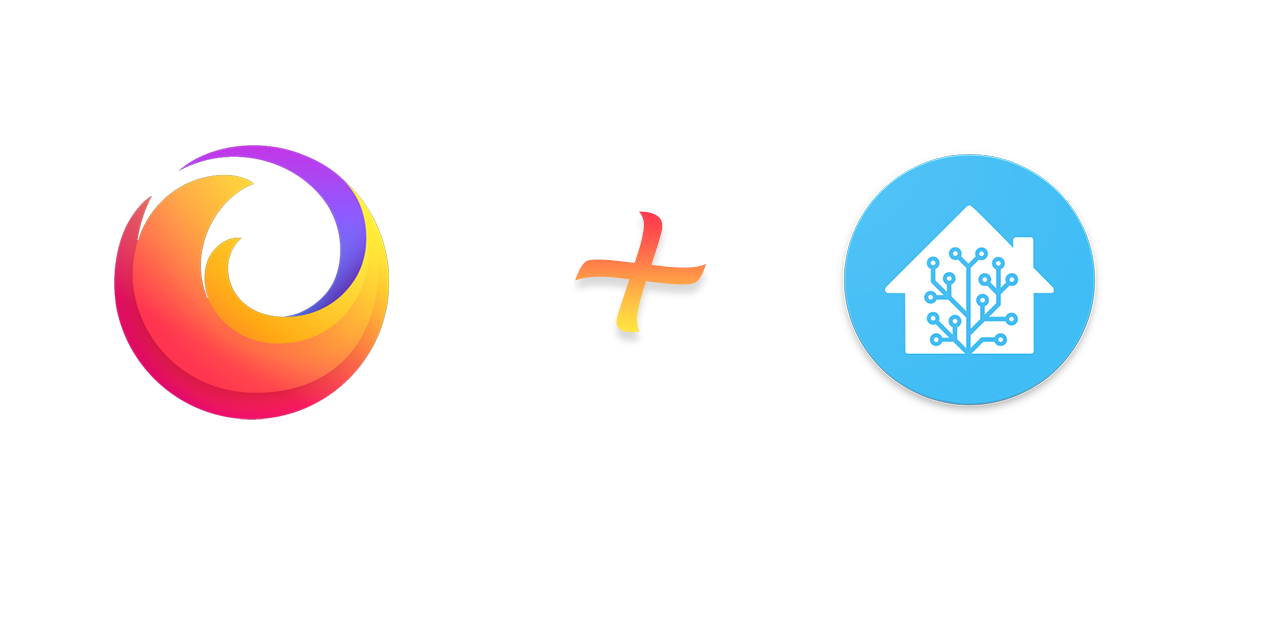
<style>
.page{position:relative;width:1280px;height:640px;background:#ffffff}
.page>*{position:absolute;margin:0}
.t1{font:229.2px "LucidaHandwriting-Italic"}
</style>
<div class="page">
<p class="t1" style="left:575px;top:211px;width:131px;height:121px;rotate:7deg">+</p>
</div>
